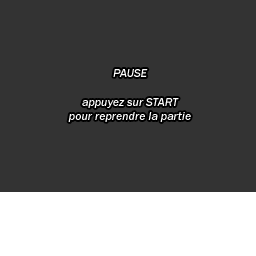
<style>
.page{position:relative;width:256px;height:256px;background:#333333}
.page>*{position:absolute;margin:0}
.t1{font:12px "FranklinGothic-MediumItalic";color:#ffffff}
</style>
<div class="page">
<p class="t1" style="left:68px;top:69px;width:123px;height:53px;text-align:center">PAUSE<br><br>appuyez sur START<br>pour reprendre la partie</p>
</div>
